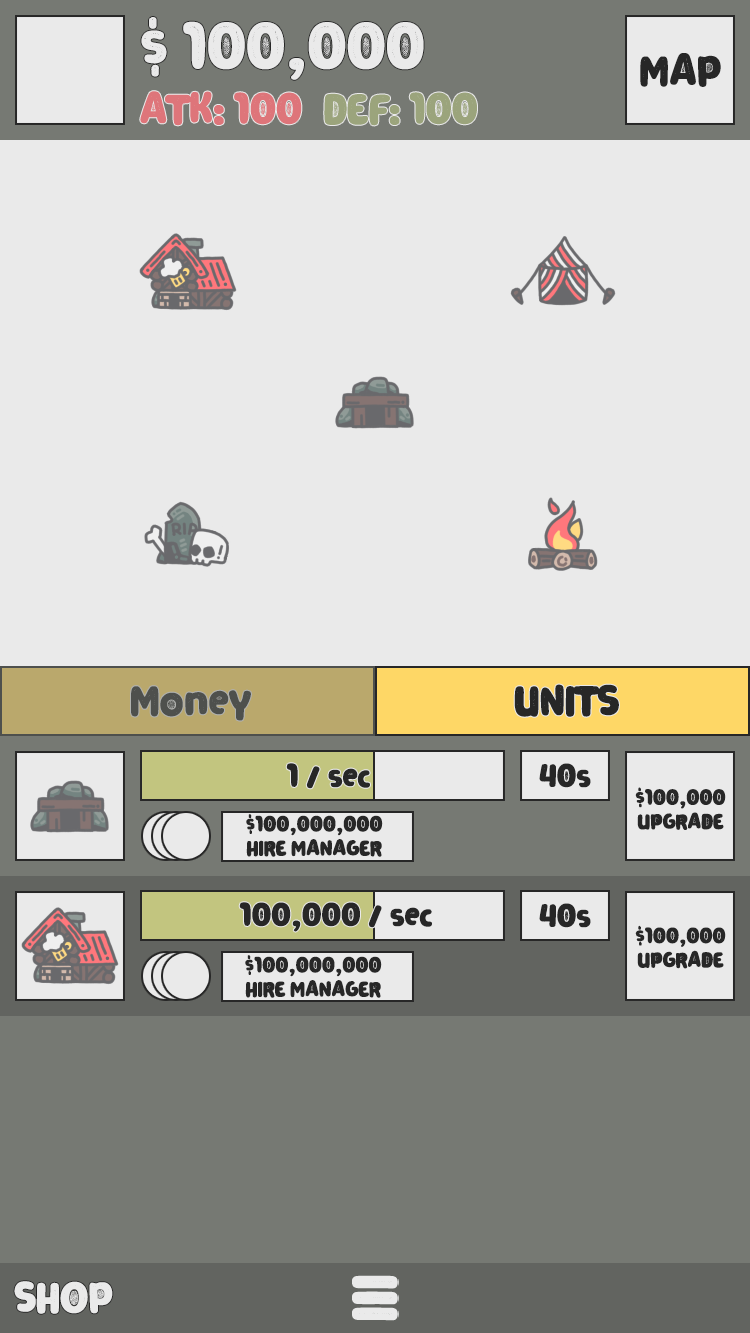
<style>
.page{position:relative;width:750px;height:1333px;background:#eaeaea}
.page>*{position:absolute;margin:0}
.t1{font:72px "ClarenceTwo-Regular";color:#eaeaea}
.t2{font:48px "ClarenceTwo-Regular";color:#272727}
.t3{font:48px "ClarenceTwo-Regular";color:#de757a}
.t4{font:48px "ClarenceTwo-Regular";color:#4e504d}
.t5{font:36px "ClarenceTwo-Regular";color:#272727}
.t6{font:24px/24px "ClarenceTwo-Regular";color:#272727}
.t7{font:48px "ClarenceTwo-Regular";color:#eaeaea}
</style>
<div class="page">
<p class="t1" style="left:141px;top:17px;width:283px;height:63px">$ 100,000</p>
<p class="t2" style="left:640px;top:53px;width:81px;height:34px">MAP</p>
<p class="t3" style="left:140px;top:91px;width:162px;height:35px">ATK: 100</p>
<p class="t4" style="left:131px;top:686px;width:120px;height:35px">Money</p>
<p class="t2" style="left:514px;top:684px;width:105px;height:33px">UNITS</p>
<p class="t5" style="left:286px;top:763px;width:84px;height:26px">1 / sec</p>
<p class="t5" style="left:539px;top:763px;width:52px;height:25px">40s</p>
<p class="t6" style="left:635px;top:787px;width:91px;height:43px;text-align:center">$100,000<br>UPGRADE</p>
<p class="t6" style="left:246px;top:814px;width:137px;height:43px;text-align:center">$100,000,000<br>HIRE MANAGER</p>
<p class="t5" style="left:239px;top:902px;width:193px;height:30px">100,000 / sec</p>
<p class="t5" style="left:539px;top:903px;width:52px;height:25px">40s</p>
<p class="t6" style="left:635px;top:925px;width:91px;height:44px;text-align:center">$100,000<br>UPGRADE</p>
<p class="t6" style="left:245px;top:955px;width:137px;height:43px;text-align:center">$100,000,000<br>HIRE MANAGER</p>
<p class="t7" style="left:14px;top:1281px;width:99px;height:33px">SHOP</p>
</div>
